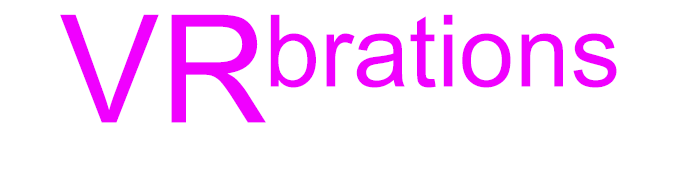
<style>
.page{position:relative;width:695px;height:180px;background:#ffffff}
.page>*{position:absolute;margin:0}
.t1{font:150px "ArialMT";color:#f000ff}
.t2{font:100px "ArialMT";color:#f000ff}
</style>
<div class="page">
<p class="t1" style="left:60px;top:14px;width:206px;height:109px">VR</p>
<p class="t2" style="left:270px;top:14px;width:347px;height:74px">brations</p>
</div>
